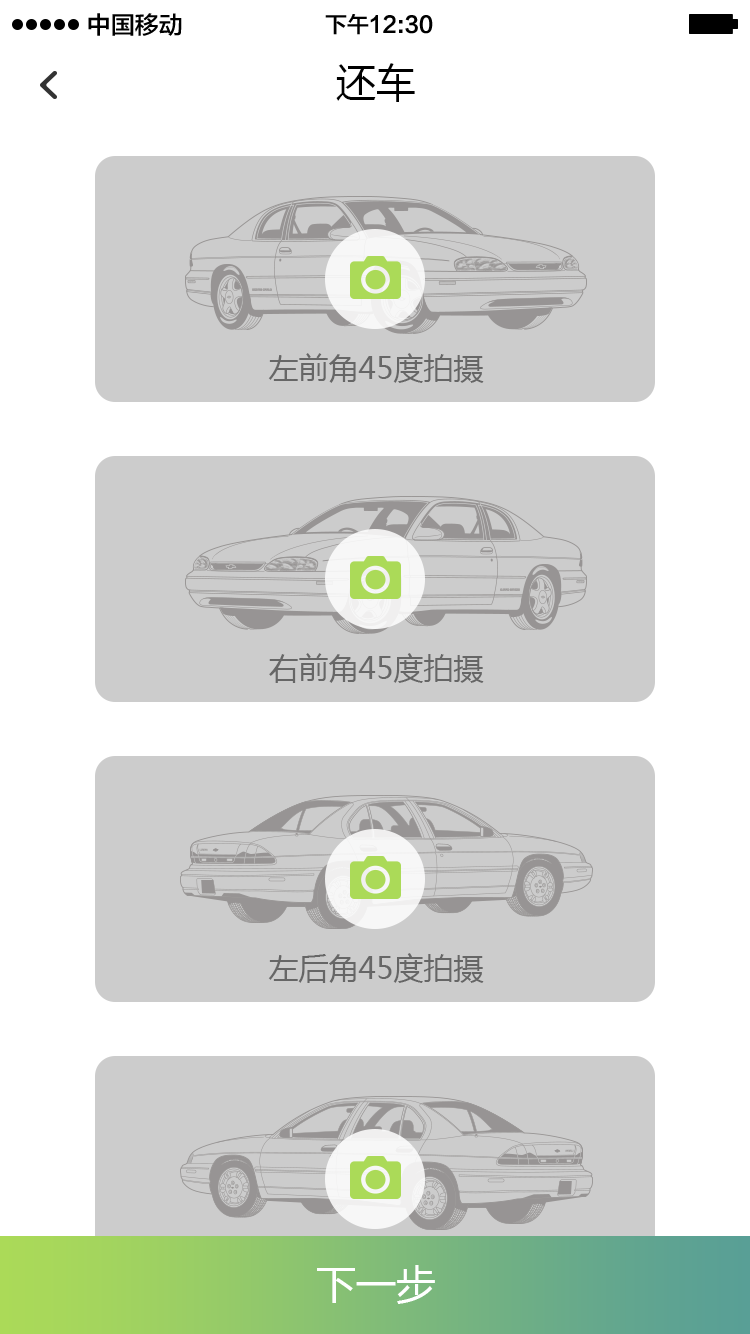
<style>
.page{position:relative;width:750px;height:1334px;background:#cccccc}
.page>*{position:absolute;margin:0}
.t1{font:24px "FZLTZHK--GBK1-0";color:#000000}
.t2{font:22px "FZLTZHK--GBK1-0";color:#000000}
.t3{font:40px "MicrosoftYaHei";color:#000000}
.t4{font:30px "MicrosoftYaHei";color:#666666}
.t5{font:40px "MicrosoftYaHei";color:#ffffff}
</style>
<div class="page">
<p class="t1" style="left:88px;top:13px;width:94px;height:23px">中国移动</p>
<p class="t2" style="left:325px;top:14px;width:108px;height:21px">下午12:30</p>
<p class="t3" style="left:336px;top:63px;width:79px;height:39px">还车</p>
<p class="t4" style="left:268px;top:353px;width:216px;height:30px">左前角45度拍摄</p>
<p class="t4" style="left:269px;top:653px;width:215px;height:30px">右前角45度拍摄</p>
<p class="t4" style="left:268px;top:953px;width:216px;height:30px">左后角45度拍摄</p>
<p class="t5" style="left:317px;top:1265px;width:118px;height:39px">下一步</p>
</div>
